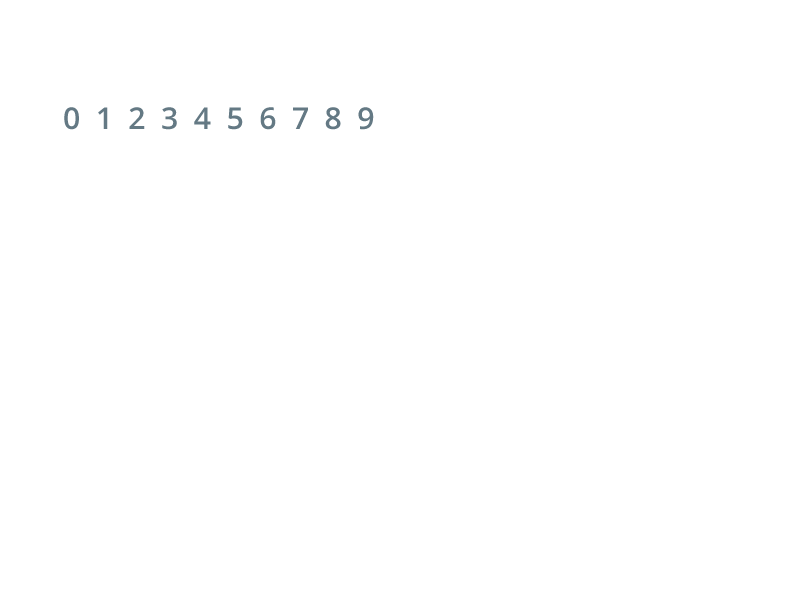
<style>
.page{position:relative;width:800px;height:600px;background:#ffffff}
.page>*{position:absolute;margin:0}
.t1{font:30px "OpenSans-Semibold";color:#647984}
</style>
<div class="page">
<p class="t1" style="left:64px;top:107px;width:310px;height:23px">0  1  2  3  4  5  6  7  8  9</p>
</div>
